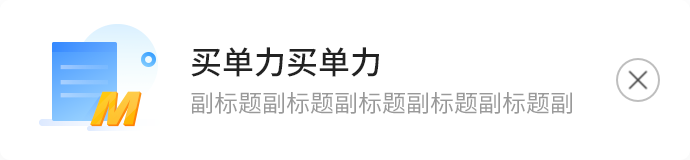
<style>
.page{position:relative;width:690px;height:160px;background:#ffffff}
.page>*{position:absolute;margin:0}
.t1{font:32px "SourceHanSansCN-Medium";color:#222222}
.t2{font:24px "SourceHanSansCN-Regular";color:#999999}
</style>
<div class="page">
<p class="t1" style="left:191px;top:47px;width:188px;height:30px">买单力买单力</p>
<p class="t2" style="left:191px;top:92px;width:381px;height:22px">副标题副标题副标题副标题副标题副</p>
</div>
